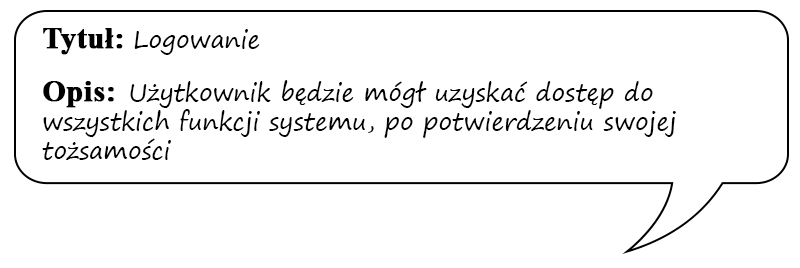
<style>
.page{position:relative;width:800px;height:268px;background:#ffffff}
.page>*{position:absolute;margin:0}
.t1{font:24px "SegoePrint";color:#000000}
.t2{font:30px "TimesNewRomanPS-BoldMT";color:#000000;font-weight:bold}
</style>
<div class="page">
<p class="t1" style="left:42px;top:28px;width:634px;height:132px"><span class="t2">Tytuł: </span>Logowanie<br><br><span class="t2">Opis:  </span>Użytkownik będzie mógł uzyskać dostęp do wszystkich funkcji systemu, po potwierdzeniu swojej tożsamości</p>
</div>
